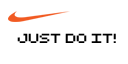
<style>
.page{position:relative;width:128px;height:64px;background:#ffffff}
.page>*{position:absolute;margin:0}
.t1{font:13px "RetroComputer";color:#000000}
</style>
<div class="page">
<p class="t1" style="left:17px;top:33px;width:99px;height:10px">JUST DO IT!</p>
</div>
